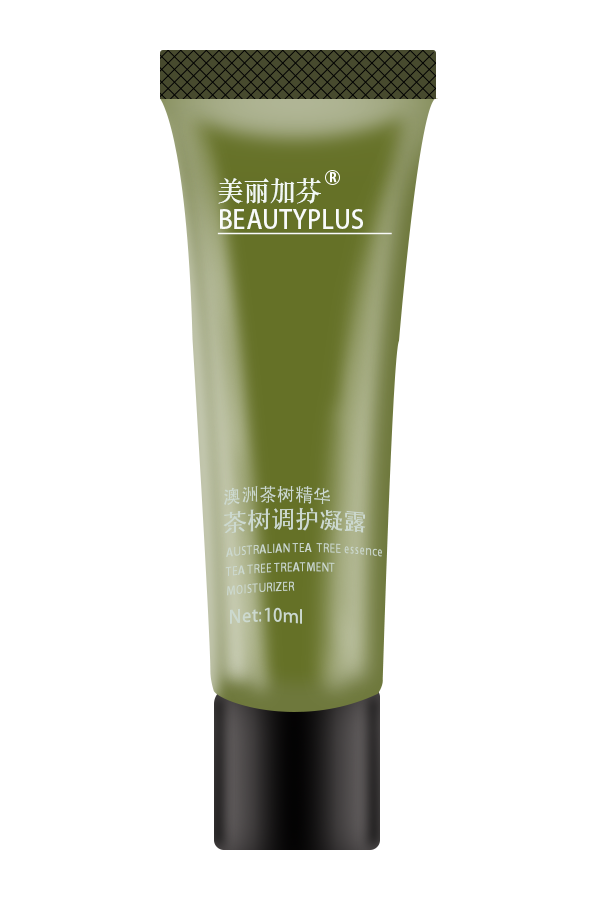
<style>
.page{position:relative;width:600px;height:900px;background:#ffffff}
.page>*{position:absolute;margin:0}
.t1{font:12px "AdobeHeitiStd-Regular";color:#ffffff;font-weight:bold}
.t2{font:27.6px "STZhongsong";color:#f2f8f3;scale:0.94 1}
.t3{font:26px "AdobeHeitiStd-Regular";color:#f9fbf9;text-decoration:underline;scale:0.94 1}
.t4{font:18px "AdobeHeitiStd-Regular";color:#ccd9cf}
.t5{font:24px "AdobeHeitiStd-Regular";color:#ccd9cf}
.t6{font:11px "AdobeHeitiStd-Regular";color:#ccd9cf}
</style>
<div class="page">
<p class="t1" style="left:330px;top:172px;width:7px;height:11px">R</p>
<p class="t2" style="left:218px;top:178px;width:103px;height:26px">美丽加芬</p>
<p class="t3" style="left:217px;top:209px;width:175px;height:26px">BEAUTYPLUS</p>
<p class="t4" style="left:224px;top:485px;width:106px;height:20px">澳洲茶树精华</p>
<p class="t5" style="left:223px;top:507px;width:143px;height:26px">茶树调护凝露</p>
<p class="t6" style="left:225px;top:543px;width:157px;height:53px">AUSTRALIAN TEA  TREE essence <br>TEA TREE TREATMENT <br>MOISTURIZER</p>
<p class="t4" style="left:230px;top:607px;width:72px;height:17px">Net:10ml</p>
</div>
